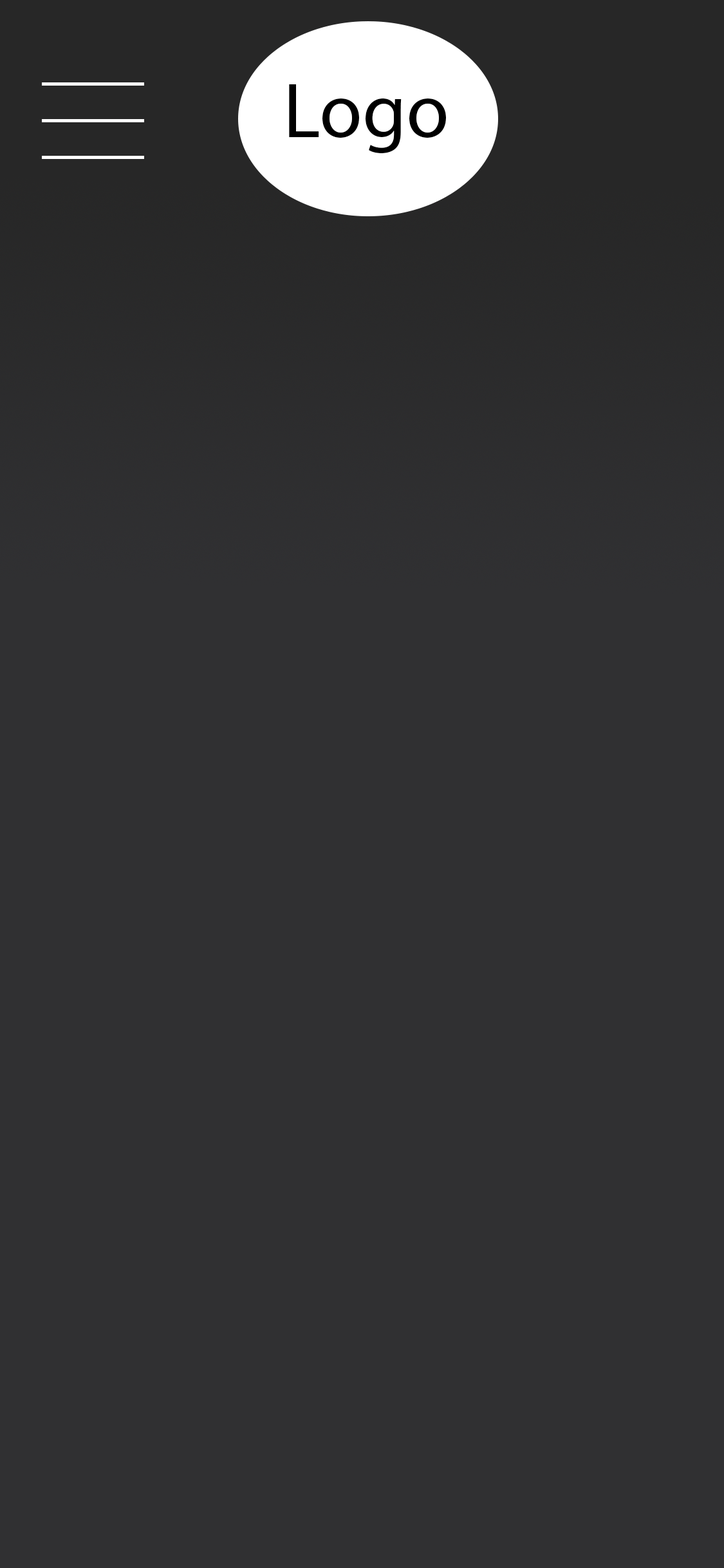
<style>
.page{position:relative;width:724px;height:1568px;background:#303032}
.page>*{position:absolute;margin:0}
.t1{font:78.5px "MyriadPro-Regular";color:#000000}
</style>
<div class="page">
<p class="t1" style="left:289px;top:84px;width:157px;height:70px">Logo</p>
</div>
